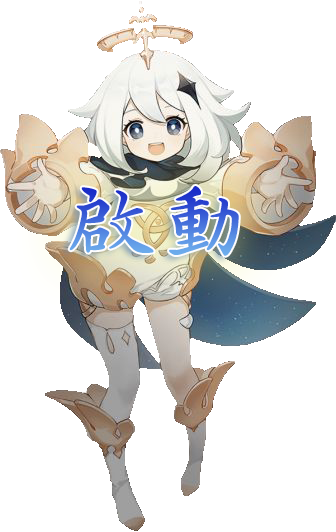
<style>
.page{position:relative;width:336px;height:532px;background:#ffffff}
.page>*{position:absolute;margin:0}
.t1{font:96px "DFWZMing-W4-WINP-BF";letter-spacing:-0.05em;font-weight:bold}
</style>
<div class="page">
<p class="t1" style="left:69px;top:186px;width:170px;height:70px">啟動</p>
</div>
